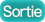
<style>
.page{position:relative;width:45px;height:22px}
.page>*{position:absolute;margin:0}
.t1{font:14px "GothicMB101Pro-Medium";letter-spacing:-0.04em;color:#fffaf4;scale:0.9 1}
</style>
<div class="page">
<p class="t1" style="left:3px;top:5px;width:39px;height:12px">Sortie</p>
</div>
